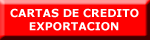
<style>
.page{position:relative;width:150px;height:40px;background:#ff0000}
.page>*{position:absolute;margin:0}
.t1{font:11px "Verdana-Bold";color:#ffffff}
</style>
<div class="page">
<p class="t1" style="left:10px;top:8px;width:129px;height:23px">CARTAS DE CREDITO<br>     EXPORTACION</p>
</div>
